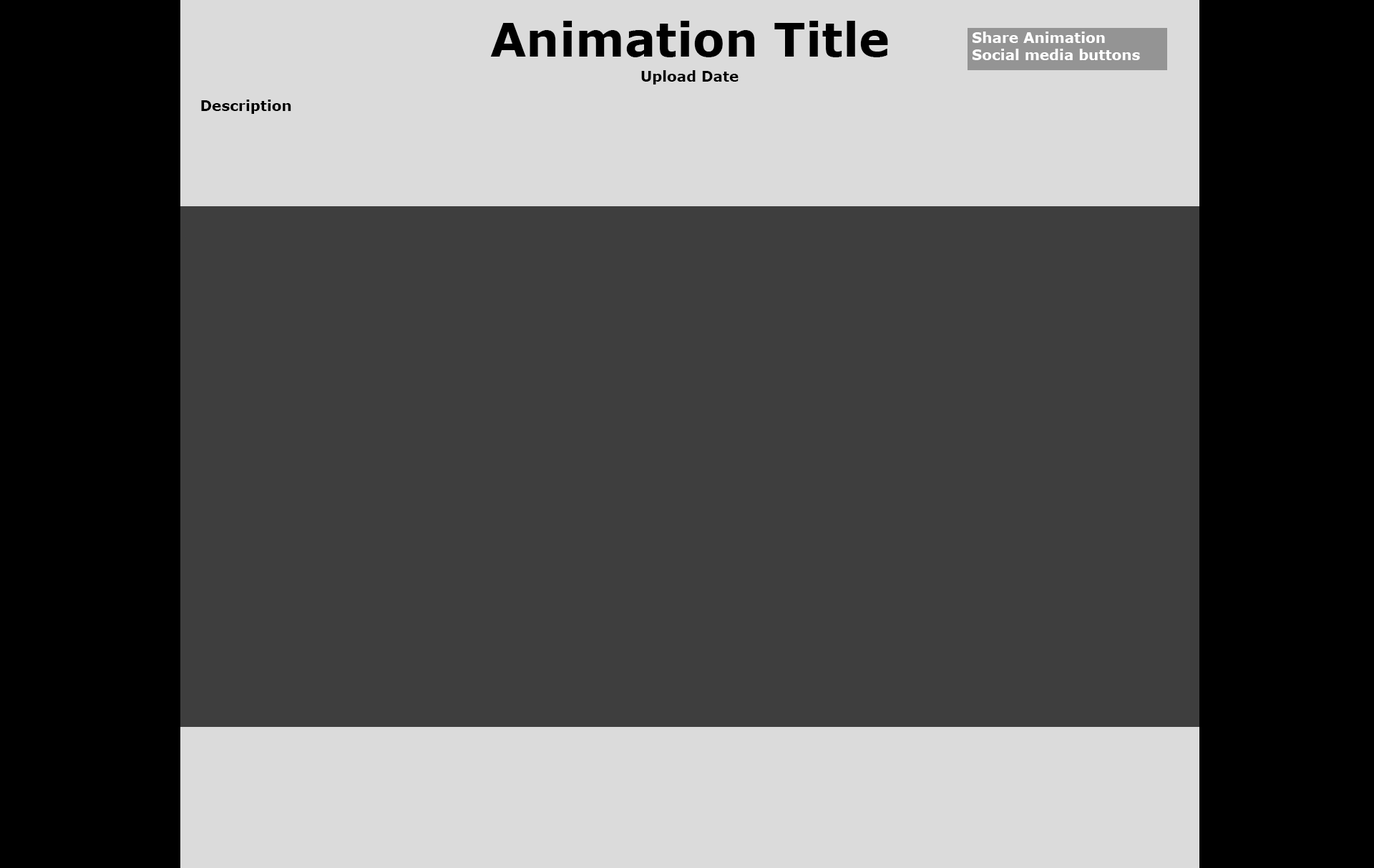
<style>
.page{position:relative;width:1374px;height:868px;background:#3e3e3e}
.page>*{position:absolute;margin:0}
.t1{font:46.6px "Verdana-Bold";color:#000000}
.t2{font:14.3px "Verdana-Bold";color:#ffffff}
.t3{font:14.3px "Verdana-Bold";color:#000000}
</style>
<div class="page">
<p class="t1" style="left:490px;top:21px;width:398px;height:36px">Animation Title</p>
<p class="t2" style="left:973px;top:31px;width:167px;height:29px">Share Animation<br>Social media buttons</p>
<p class="t3" style="left:641px;top:70px;width:98px;height:14px">Upload Date</p>
<p class="t3" style="left:201px;top:100px;width:90px;height:14px">Description</p>
</div>
